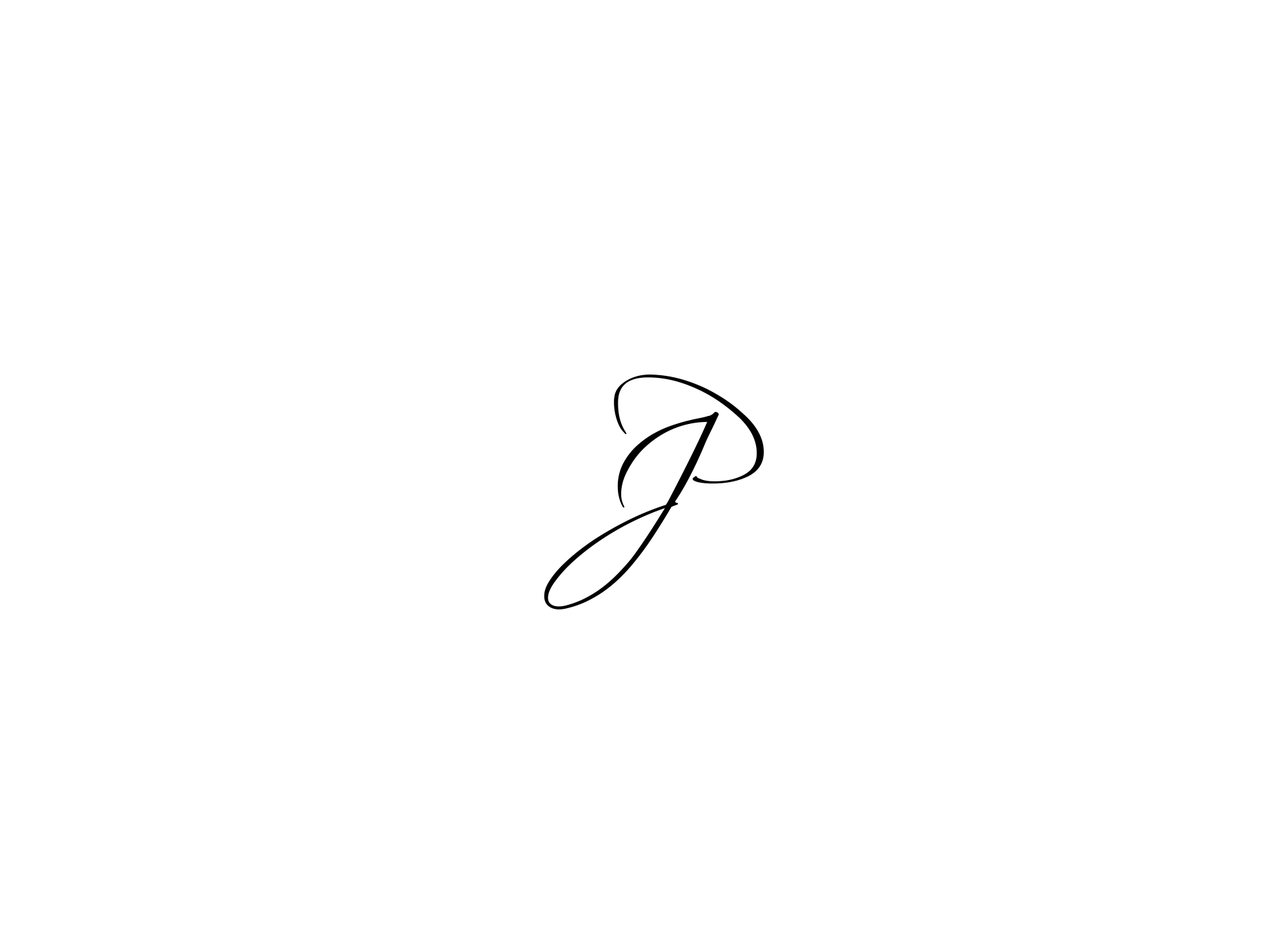
<style>
.page{position:relative;width:1261px;height:946px;background:#ffffff}
.page>*{position:absolute;margin:0}
.t1{font:166.8px "Scriptina";color:#000000}
</style>
<div class="page">
<p class="t1" style="left:544px;top:411px;width:175px;height:198px">J</p>
</div>
